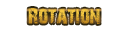
<style>
.page{position:relative;width:128px;height:32px;background:#ffffff}
.page>*{position:absolute;margin:0}
.t1{font:22px "28DaysLater";color:#edbf3d;scale:0.91 1}
</style>
<div class="page">
<p class="t1" style="left:28px;top:8px;width:72px;height:16px">Rotation</p>
</div>
